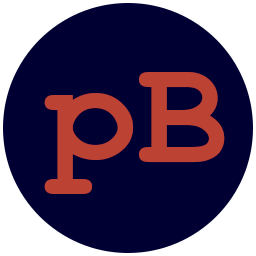
<style>
.page{position:relative;width:256px;height:256px;background:#000033}
.page>*{position:absolute;margin:0}
.t1{font:152px "CourierNewPS-BoldMT";color:#bc4234}
</style>
<div class="page">
<p class="t1" style="left:44px;top:72px;width:181px;height:122px">pB</p>
</div>
